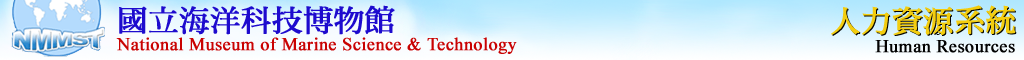
<style>
.page{position:relative;width:1024px;height:60px}
.page>*{position:absolute;margin:0}
.t1{font:30px "DFMing-Bd-HK-BF";letter-spacing:0.005em;color:#1e0bce;font-weight:bold}
.t2{font:18px "TimesNewRomanPSMT";letter-spacing:0.005em;color:#c90202;font-weight:bold}
.t3{font:18px "TimesNewRomanPSMT";letter-spacing:0.005em;color:#020202;font-weight:bold}
</style>
<div class="page">
<p class="t1" style="left:119px;top:5px;width:276px;height:30px">國立海洋科技博物館</p>
<p class="t2" style="left:116px;top:37px;width:401px;height:17px">National Museum of Marine Science &amp; Technology</p>
<p class="t3" style="left:875px;top:40px;width:140px;height:13px">Human Resources</p>
</div>
